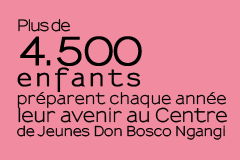
<style>
.page{position:relative;width:240px;height:160px;background:#f18ca0}
.page>*{position:absolute;margin:0}
.t1{font:13.2px/14px "Sansumi-Bold";letter-spacing:0.015em;color:#000000;scale:0.93 1}
.t2{font:24px/25px "Sansumi-Bold";letter-spacing:-0.04em;color:#000000}
.t3{font:15.4px/31px "Sansumi-Bold";letter-spacing:-0.07em;color:#000000;scale:0.93 1}
.t4{font:38.2px/34px "Sansumi-Bold";letter-spacing:-0.06em;color:#000000;font-weight:bold;scale:0.93 1}
.t5{font:22.3px/21px "Sansumi-Bold";letter-spacing:0.179em;color:#000000;font-weight:bold;scale:0.93 1}
.t6{font:15.4px/18px "Sansumi-Bold";letter-spacing:0.02em;color:#000000;scale:0.93 1}
.t7{font:18.6px/18px "Sansumi-Bold";color:#000000;scale:0.93 1}
</style>
<div class="page">
<p class="t1" style="left:17px;top:19px;width:210px;height:121px"><span class="t2"><br></span><span class="t3">Plus de<br></span><span class="t4">4.500<br></span><span class="t5">enfants<br></span><span class="t6">préparent chaque année<br></span><span class="t7">leur avenir au Centre<br></span>de Jeunes Don Bosco Ngangi</p>
</div>
